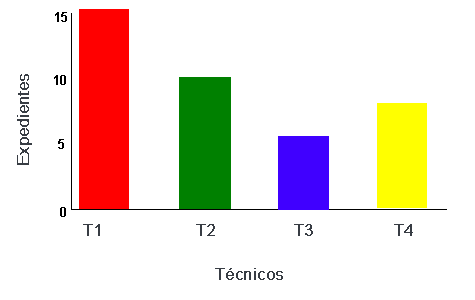
<style>
.page{position:relative;width:475px;height:300px;background:#ffffff}
.page>*{position:absolute;margin:0}
.t1{font:16.5px "ArialMT";color:#383d44;font-weight:bold}
</style>
<div class="page">
<p class="t1" style="left:17px;top:74px;width:15px;height:91px;rotate:-90deg">Expedientes</p>
<p class="t1" style="left:83px;top:224px;width:17px;height:12px">T1</p>
<p class="t1" style="left:196px;top:224px;width:19px;height:12px">T2</p>
<p class="t1" style="left:294px;top:224px;width:19px;height:12px">T3</p>
<p class="t1" style="left:394px;top:224px;width:19px;height:12px">T4</p>
<p class="t1" style="left:215px;top:268px;width:68px;height:12px">Técnicos</p>
</div>
